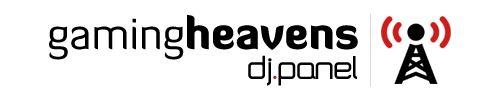
<style>
.page{position:relative;width:500px;height:100px;background:#ffffff}
.page>*{position:absolute;margin:0}
.t1{font:44px "DiavloBlack-Regular";color:#000000}
.t2{font:44px "DiavloBook-Regular";color:#000000}
.t3{font:33.3px "SquareTypeB";color:#000000}
.t4{font:33.3px "SquareTypeB";color:#ce1b1b}
</style>
<div class="page">
<p class="t1" style="left:49px;top:15px;width:309px;height:45px"><span class="t2">gaming</span>heavens</p>
<p class="t3" style="left:248px;top:55px;width:109px;height:31px">dj<span class="t4">.</span>panel</p>
</div>
